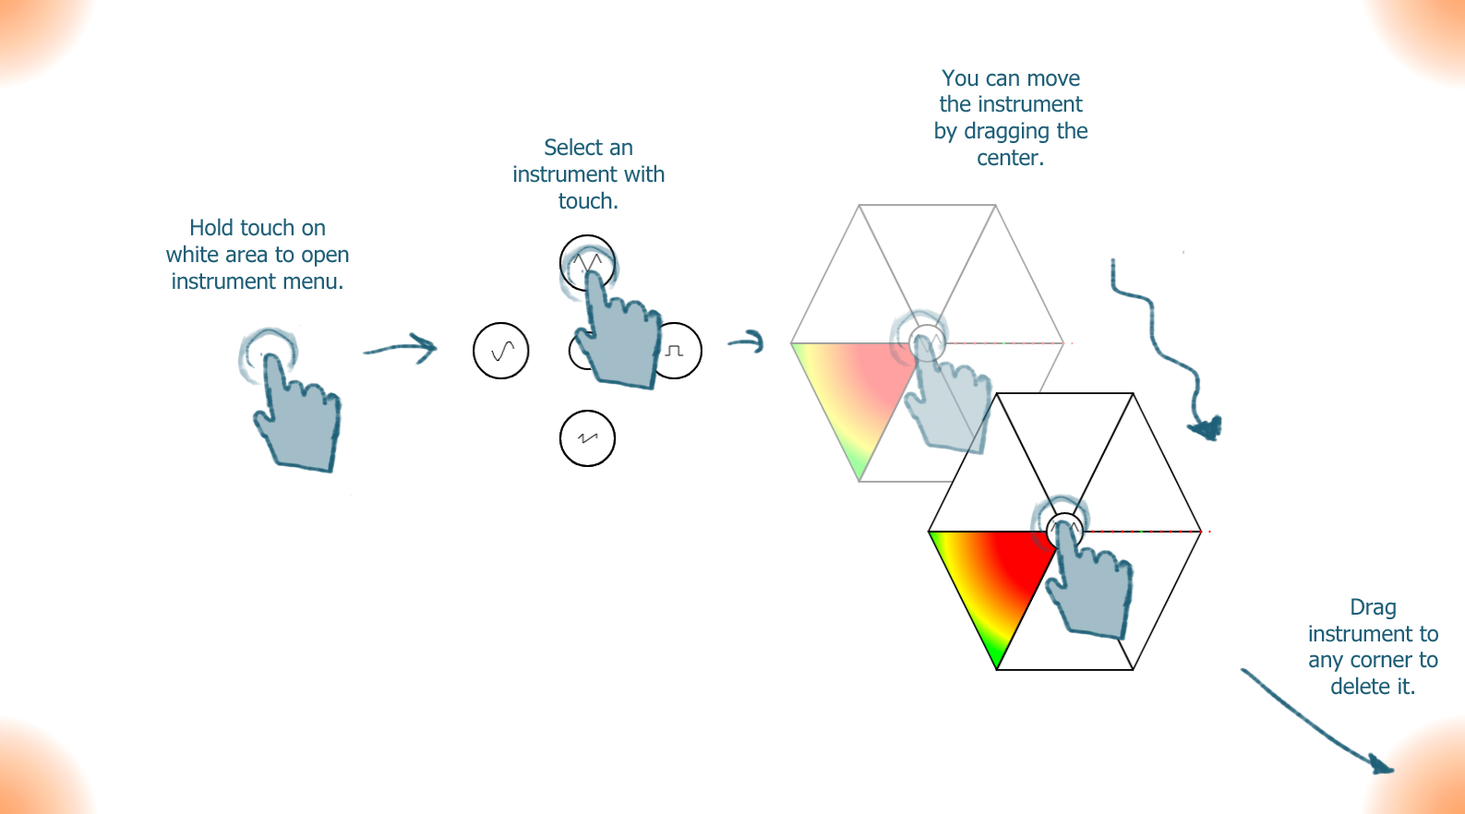
<style>
.page{position:relative;width:1465px;height:814px;background:#ffffff}
.page>*{position:absolute;margin:0}
.t1{font:22.1px "Tahoma";color:#1f5f77}
</style>
<div class="page">
<p class="t1" style="left:935px;top:69px;width:152px;height:97px;text-align:center">You can move the instrument by dragging the center.</p>
<p class="t1" style="left:513px;top:138px;width:152px;height:72px;text-align:center">Select an instrument with touch.</p>
<p class="t1" style="left:166px;top:218px;width:183px;height:72px;text-align:center">Hold touch on white area to open instrument menu.</p>
<p class="t1" style="left:1309px;top:598px;width:129px;height:97px;text-align:center">Drag instrument to any corner to delete it.</p>
</div>
